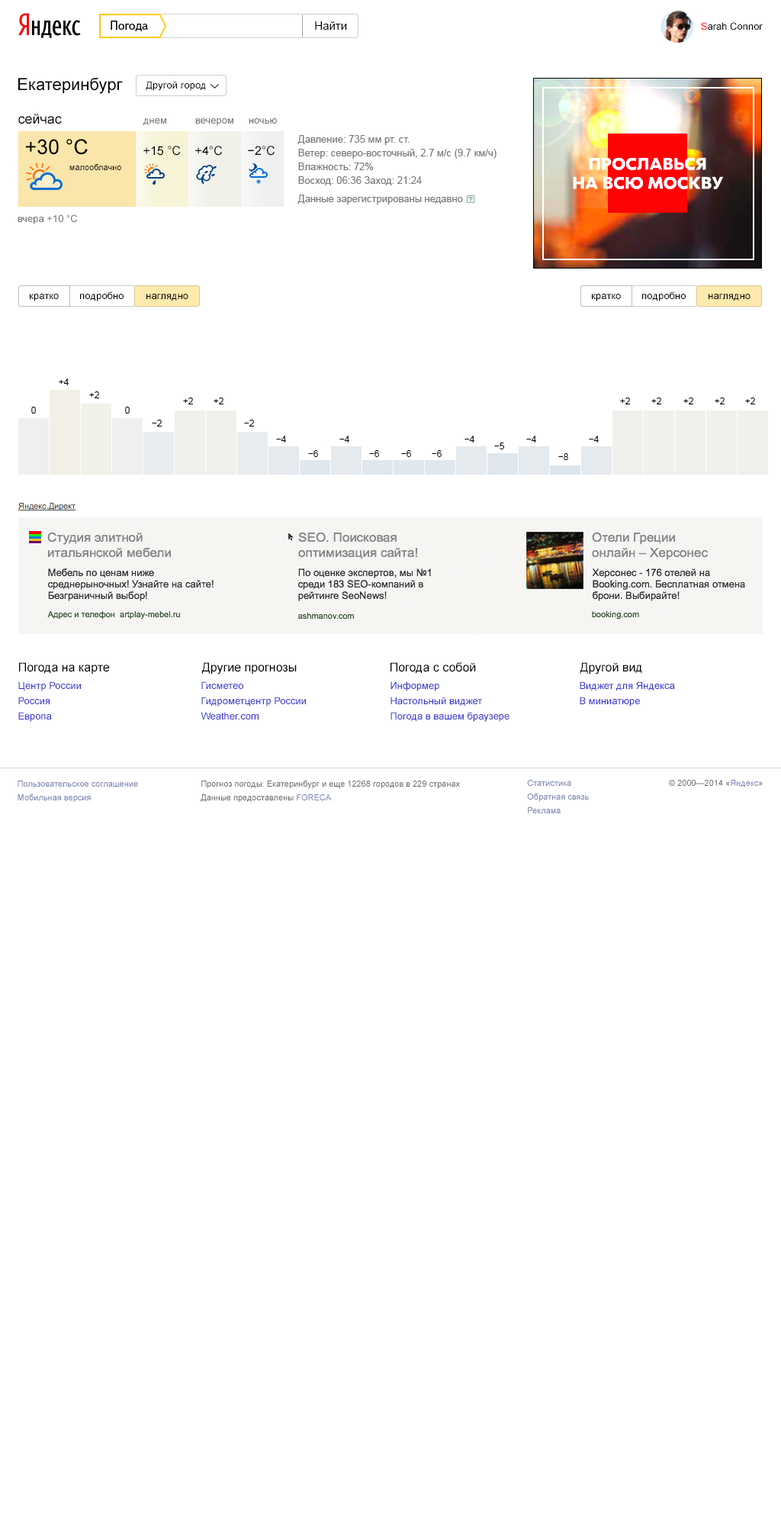
<style>
.page{position:relative;width:781px;height:1526px;background:#ffffff}
.page>*{position:absolute;margin:0}
.t1{font:12.2px "TextbookNew-Regular";color:#000000}
.t2{font:11.4px "ArialMT";color:#000000}
.t3{font:9.9px "ArialMT";color:#000000}
.t4{font:9.9px "ArialMT";color:#ff0000}
.t5{font:16.8px "ArialMT";color:#000000}
.t6{font:13.7px "ArialMT";color:#000000}
.t7{font:9.9px "ArialMT";color:#6d6e6e}
.t8{font:9.9px/13.7px "ArialMT";color:#797979}
.t9{font:9.9px/18.3px "ArialMT";color:#797979}
.t10{font:20.6px "ArialMT";color:#000000}
.t11{font:12.2px "ArialMT";color:#000000}
.t12{font:8.4px "ArialMT";color:#000000}
.t13{font:9.2px "ArialMT";color:#000000}
.t14{font:9.9px/15.3px "ArialMT";color:#3333cc}
.t15{font:8.4px/13.7px "ArialMT";color:#747eaf}
.t16{font:8.4px/13.7px "ArialMT";color:#666666}
.t17{font:8.4px "ArialMT";color:#666666}
.t18{font:8.4px "ArialMT";color:#747eaf}
</style>
<div class="page">
<p class="t1" style="left:111px;top:21px;width:37px;height:10px">Погода</p>
<p class="t2" style="left:315px;top:21px;width:32px;height:9px">Найти</p>
<p class="t3" style="left:701px;top:22px;width:62px;height:9px"><span class="t4">S</span>arah Connor</p>
<p class="t5" style="left:18px;top:78px;width:105px;height:16px">Екатеринбург</p>
<p class="t3" style="left:146px;top:81px;width:60px;height:10px">Другой город</p>
<p class="t6" style="left:18px;top:114px;width:44px;height:10px">сейчас</p>
<p class="t7" style="left:143px;top:118px;width:23px;height:7px">днем</p>
<p class="t7" style="left:195px;top:118px;width:38px;height:8px">вечером</p>
<p class="t7" style="left:249px;top:118px;width:28px;height:6px">ночью</p>
<p class="t8" style="left:298px;top:135px;width:199px;height:69px">Давление: 735 мм рт. ст.<br>Ветер: северо-восточный, 2.7 м/с (9.7 км/ч)<br>Влажность: 72%<br>Восход: 06:36 Заход: 21:24<br><span class="t9">Данные зарегистрированы недавно</span></p>
<p class="t10" style="left:26px;top:139px;width:62px;height:16px">+30 °C</p>
<p class="t11" style="left:143px;top:146px;width:38px;height:10px">+15 °C</p>
<p class="t11" style="left:195px;top:146px;width:27px;height:10px">+4°C</p>
<p class="t11" style="left:248px;top:146px;width:27px;height:10px">−2°C</p>
<p class="t12" style="left:69px;top:163px;width:52px;height:7px">малооблачно</p>
<p class="t7" style="left:18px;top:214px;width:59px;height:10px">вчера +10 °C</p>
<p class="t3" style="left:30px;top:294px;width:29px;height:7px">кратко</p>
<p class="t3" style="left:80px;top:291px;width:44px;height:10px">подробно</p>
<p class="t3" style="left:147px;top:294px;width:41px;height:7px">наглядно</p>
<p class="t3" style="left:592px;top:294px;width:29px;height:7px">кратко</p>
<p class="t3" style="left:642px;top:291px;width:44px;height:10px">подробно</p>
<p class="t3" style="left:709px;top:294px;width:42px;height:7px">наглядно</p>
<p class="t13" style="left:59px;top:378px;width:10px;height:7px">+4</p>
<p class="t13" style="left:89px;top:391px;width:10px;height:7px">+2</p>
<p class="t13" style="left:183px;top:398px;width:10px;height:6px">+2</p>
<p class="t13" style="left:214px;top:398px;width:10px;height:6px">+2</p>
<p class="t13" style="left:620px;top:398px;width:10px;height:6px">+2</p>
<p class="t13" style="left:652px;top:398px;width:10px;height:6px">+2</p>
<p class="t13" style="left:684px;top:398px;width:10px;height:6px">+2</p>
<p class="t13" style="left:715px;top:398px;width:10px;height:6px">+2</p>
<p class="t13" style="left:745px;top:398px;width:10px;height:6px">+2</p>
<p class="t13" style="left:31px;top:407px;width:5px;height:7px">0</p>
<p class="t13" style="left:125px;top:407px;width:5px;height:7px">0</p>
<p class="t13" style="left:152px;top:420px;width:10px;height:7px">−2</p>
<p class="t13" style="left:244px;top:420px;width:10px;height:7px">−2</p>
<p class="t13" style="left:276px;top:436px;width:10px;height:7px">−4</p>
<p class="t13" style="left:340px;top:436px;width:9px;height:7px">−4</p>
<p class="t13" style="left:465px;top:436px;width:10px;height:7px">−4</p>
<p class="t13" style="left:527px;top:436px;width:9px;height:7px">−4</p>
<p class="t13" style="left:589px;top:436px;width:10px;height:7px">−4</p>
<p class="t13" style="left:494px;top:443px;width:10px;height:6px">−5</p>
<p class="t13" style="left:308px;top:450px;width:10px;height:7px">−6</p>
<p class="t13" style="left:369px;top:450px;width:10px;height:7px">−6</p>
<p class="t13" style="left:401px;top:450px;width:10px;height:7px">−6</p>
<p class="t13" style="left:432px;top:450px;width:10px;height:7px">−6</p>
<p class="t13" style="left:559px;top:453px;width:9px;height:7px">−8</p>
<p class="t11" style="left:19px;top:662px;width:91px;height:13px">Погода на карте</p>
<p class="t11" style="left:201px;top:662px;width:96px;height:13px">Другие прогнозы</p>
<p class="t11" style="left:391px;top:662px;width:85px;height:12px">Погода с собой</p>
<p class="t11" style="left:580px;top:662px;width:62px;height:13px">Другой вид</p>
<p class="t14" style="left:18px;top:681px;width:63px;height:41px">Центр России<br>Россия<br>Европа</p>
<p class="t14" style="left:201px;top:681px;width:105px;height:39px">Гисметео<br>Гидрометцентр России<br>Weather.com</p>
<p class="t14" style="left:391px;top:681px;width:119px;height:41px">Информер<br>Настольный виджет<br>Погода в вашем браузере</p>
<p class="t14" style="left:580px;top:681px;width:95px;height:26px">Виджет для Яндекса<br>В миниатюре</p>
<p class="t15" style="left:18px;top:781px;width:120px;height:22px">Пользовательское соглашение<br>Мобильная версия</p>
<p class="t16" style="left:201px;top:780px;width:259px;height:23px">Прогноз погоды: Екатеринбург и еще 12268 городов в 229 странах<br>Данные предоставлены <span class="t15">FORECA</span></p>
<p class="t15" style="left:527px;top:780px;width:62px;height:33px">Статистика <br>Обратная связь <br>Реклама</p>
<p class="t17" style="left:669px;top:780px;width:94px;height:7px">© 2000—2014 «<span class="t18">Яндекс</span>»</p>
</div>
